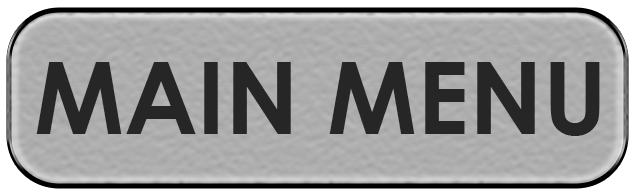
<style>
.page{position:relative;width:636px;height:195px}
.page>*{position:absolute;margin:0}
.t1{font:100px "CenturyGothic-Bold";color:#262626}
</style>
<div class="page">
<p class="t1" style="left:36px;top:62px;width:564px;height:74px">MAIN MENU</p>
</div>
